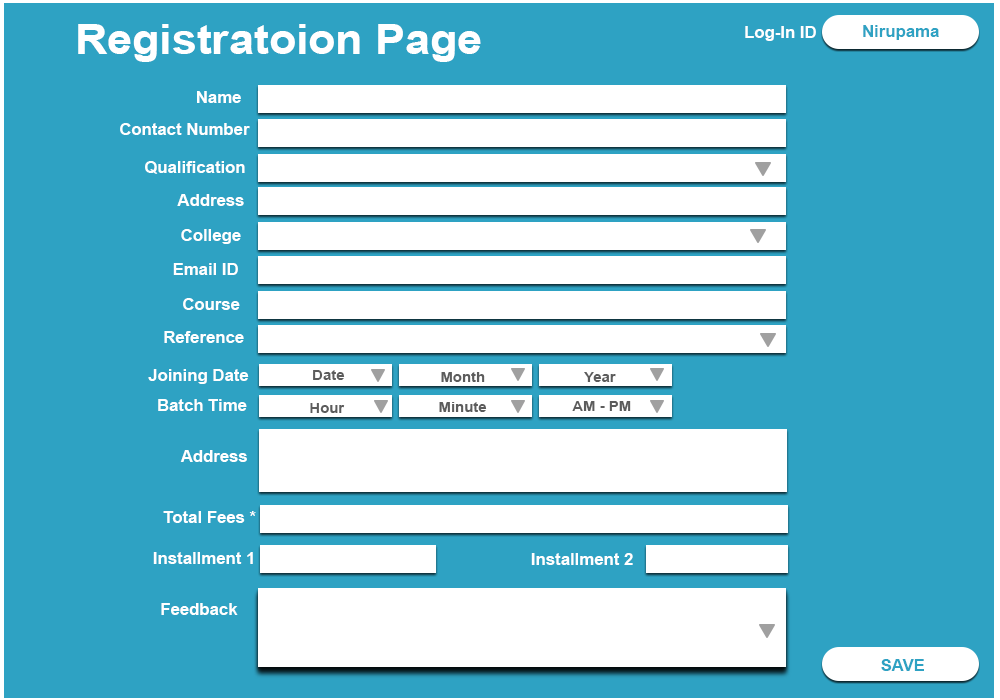
<style>
.page{position:relative;width:1000px;height:700px;background:#2ea2c3}
.page>*{position:absolute;margin:0}
.t1{font:42.2px "Arial-BoldMT";color:#ffffff;scale:1.06 1}
.t2{font:16.6px "Arial-BoldMT";color:#ffffff}
.t3{font:16.6px "Arial-BoldMT";color:#2ea2c3}
.t4{font:15.8px "Arial-BoldMT";color:#ffffff;scale:1.06 1}
.t5{font:14.3px "Arial-BoldMT";color:#5c5c5c;scale:1.05 1}
</style>
<div class="page">
<p class="t1" style="left:78px;top:24px;width:403px;height:38px">Registratoion Page</p>
<p class="t2" style="left:745px;top:26px;width:71px;height:15px">Log-In ID</p>
<p class="t3" style="left:863px;top:25px;width:76px;height:15px">Nirupama</p>
<p class="t4" style="left:197px;top:91px;width:44px;height:12px">Name</p>
<p class="t4" style="left:120px;top:123px;width:130px;height:12px">Contact Number</p>
<p class="t4" style="left:145px;top:161px;width:100px;height:13px">Qualification</p>
<p class="t4" style="left:177px;top:194px;width:67px;height:12px">Address</p>
<p class="t4" style="left:181px;top:229px;width:60px;height:15px">College</p>
<p class="t4" style="left:173px;top:263px;width:65px;height:12px">Email ID</p>
<p class="t4" style="left:183px;top:298px;width:57px;height:12px">Course</p>
<p class="t4" style="left:164px;top:331px;width:80px;height:12px">Reference</p>
<p class="t4" style="left:148px;top:369px;width:101px;height:15px">Joining Date</p>
<p class="t5" style="left:313px;top:370px;width:32px;height:10px">Date</p>
<p class="t5" style="left:441px;top:372px;width:44px;height:10px">Month</p>
<p class="t5" style="left:584px;top:372px;width:32px;height:10px">Year</p>
<p class="t4" style="left:158px;top:399px;width:89px;height:12px">Batch Time</p>
<p class="t5" style="left:572px;top:401px;width:59px;height:10px">AM - PM</p>
<p class="t5" style="left:310px;top:403px;width:35px;height:10px">Hour</p>
<p class="t5" style="left:439px;top:402px;width:48px;height:10px">Minute</p>
<p class="t2" style="left:180px;top:450px;width:67px;height:12px">Address</p>
<p class="t2" style="left:163px;top:511px;width:93px;height:12px">Total Fees *</p>
<p class="t2" style="left:153px;top:552px;width:100px;height:12px">Installment 1</p>
<p class="t2" style="left:531px;top:553px;width:102px;height:12px">Installment 2</p>
<p class="t4" style="left:161px;top:603px;width:77px;height:12px">Feedback</p>
<p class="t3" style="left:881px;top:659px;width:43px;height:12px">SAVE</p>
</div>
